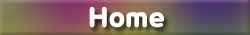
<style>
.page{position:relative;width:250px;height:35px}
.page>*{position:absolute;margin:0}
.t1{font:27.4px "LineBold";color:#ffffff}
</style>
<div class="page">
<p class="t1" style="left:89px;top:6px;width:75px;height:22px">Home</p>
</div>
